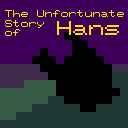
<style>
.page{position:relative;width:128px;height:128px;background:#3c0058}
.page>*{position:absolute;margin:0}
.t1{font:8px "Px437_Kaypro2K";color:#ffde00}
.t2{font:16px "Px437_Kaypro2K";color:#ffde00}
</style>
<div class="page">
<p class="t1" style="left:5px;top:10px;width:119px;height:26px">The Unfortunate<br>Story <br>of</p>
<p class="t2" style="left:57px;top:21px;width:62px;height:14px">Hans</p>
</div>
